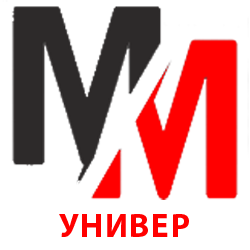
<style>
.page{position:relative;width:250px;height:250px;background:#ffffff}
.page>*{position:absolute;margin:0}
.t1{font:33.3px "MyriadPro-Bold";letter-spacing:0.05em;color:#ff0000}
</style>
<div class="page">
<p class="t1" style="left:59px;top:214px;width:130px;height:23px">УНИВЕР</p>
</div>
